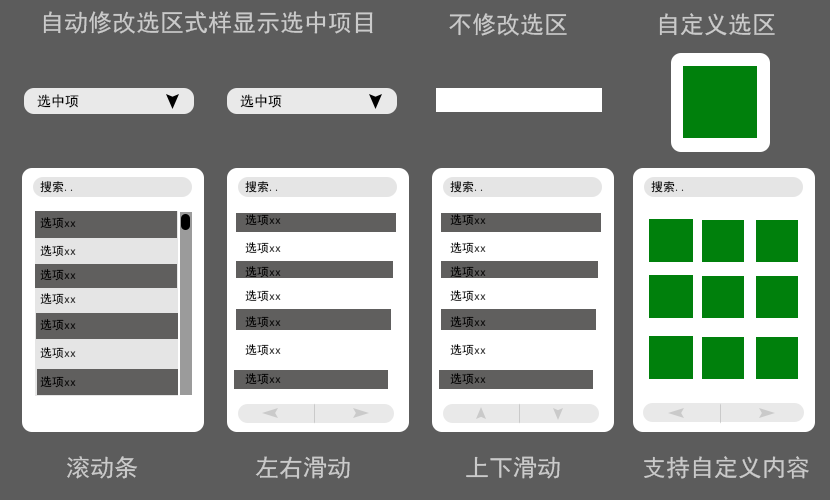
<style>
.page{position:relative;width:830px;height:500px;background:#5c5c5c}
.page>*{position:absolute;margin:0}
.t1{font:24px "SimHei";color:#cacaca}
.t2{font:14px "SimHei";color:#000000}
.t3{font:12px "SimHei";color:#000000}
</style>
<div class="page">
<p class="t1" style="left:43px;top:11px;width:330px;height:23px">自动修改选区式样显示选中项目</p>
<p class="t1" style="left:449px;top:13px;width:118px;height:23px">不修改选区</p>
<p class="t1" style="left:659px;top:13px;width:116px;height:23px">自定义选区</p>
<p class="t2" style="left:37px;top:94px;width:42px;height:14px">选中项</p>
<p class="t2" style="left:240px;top:94px;width:42px;height:14px">选中项</p>
<p class="t3" style="left:40px;top:181px;width:33px;height:12px">搜索..</p>
<p class="t3" style="left:245px;top:181px;width:33px;height:12px">搜索..</p>
<p class="t3" style="left:450px;top:181px;width:33px;height:12px">搜索..</p>
<p class="t3" style="left:651px;top:181px;width:33px;height:12px">搜索..</p>
<p class="t3" style="left:40px;top:217px;width:36px;height:12px">选项xx</p>
<p class="t3" style="left:245px;top:214px;width:36px;height:12px">选项xx</p>
<p class="t3" style="left:450px;top:214px;width:36px;height:12px">选项xx</p>
<p class="t3" style="left:40px;top:245px;width:36px;height:12px">选项xx</p>
<p class="t3" style="left:245px;top:242px;width:36px;height:12px">选项xx</p>
<p class="t3" style="left:450px;top:242px;width:36px;height:12px">选项xx</p>
<p class="t3" style="left:40px;top:269px;width:36px;height:12px">选项xx</p>
<p class="t3" style="left:245px;top:266px;width:36px;height:12px">选项xx</p>
<p class="t3" style="left:450px;top:266px;width:36px;height:12px">选项xx</p>
<p class="t3" style="left:40px;top:293px;width:36px;height:12px">选项xx</p>
<p class="t3" style="left:245px;top:290px;width:36px;height:12px">选项xx</p>
<p class="t3" style="left:450px;top:290px;width:36px;height:12px">选项xx</p>
<p class="t3" style="left:245px;top:316px;width:36px;height:12px">选项xx</p>
<p class="t3" style="left:450px;top:316px;width:36px;height:12px">选项xx</p>
<p class="t3" style="left:40px;top:319px;width:36px;height:12px">选项xx</p>
<p class="t3" style="left:40px;top:347px;width:36px;height:12px">选项xx</p>
<p class="t3" style="left:245px;top:344px;width:36px;height:12px">选项xx</p>
<p class="t3" style="left:450px;top:344px;width:36px;height:12px">选项xx</p>
<p class="t3" style="left:40px;top:376px;width:36px;height:12px">选项xx</p>
<p class="t3" style="left:245px;top:373px;width:36px;height:12px">选项xx</p>
<p class="t3" style="left:450px;top:373px;width:36px;height:12px">选项xx</p>
<p class="t1" style="left:67px;top:456px;width:71px;height:23px">滚动条</p>
<p class="t1" style="left:255px;top:456px;width:95px;height:23px">左右滑动</p>
<p class="t1" style="left:466px;top:456px;width:94px;height:23px">上下滑动</p>
<p class="t1" style="left:644px;top:456px;width:165px;height:23px">支持自定义内容</p>
</div>
